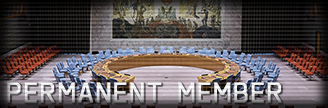
<style>
.page{position:relative;width:328px;height:108px}
.page>*{position:absolute;margin:0}
.t1{font:28px "ACES07_Regular";letter-spacing:0.025em;font-weight:bold}
</style>
<div class="page">
<p class="t1" style="left:7px;top:82px;width:275px;height:21px">PERMANENT MEMBER</p>
</div>
